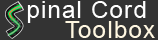
<style>
.page{position:relative;width:158px;height:40px;background:#333333}
.page>*{position:absolute;margin:0}
.t1{font:24px "ArialMT";letter-spacing:0.05em;color:#ffffff}
.t2{font:24px "ArialMT";letter-spacing:0.05em;color:#fff7e1}
</style>
<div class="page">
<p class="t1" style="left:27px;top:1px;width:119px;height:22px">pinal Cord</p>
<p class="t2" style="left:65px;top:21px;width:90px;height:17px">Toolbox</p>
</div>
